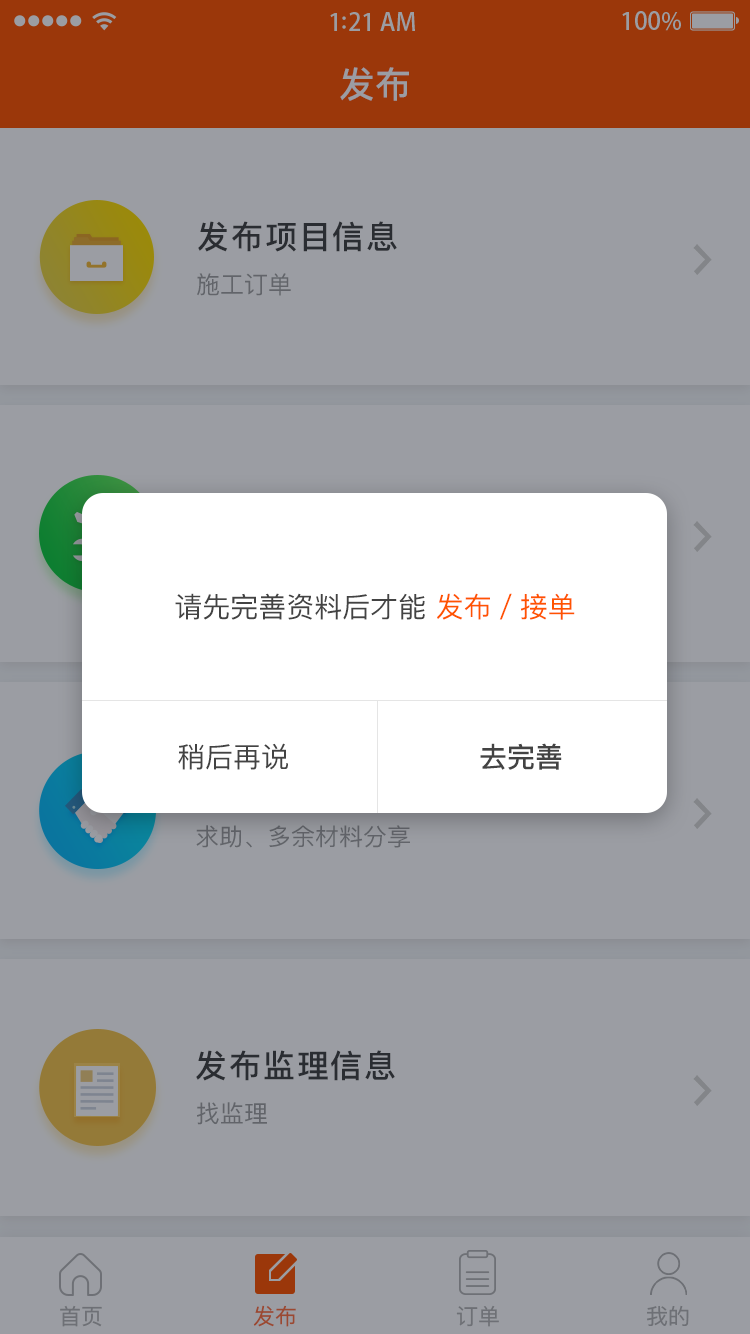
<style>
.page{position:relative;width:750px;height:1334px;background:#9b9da3}
.page>*{position:absolute;margin:0}
.t1{font:36px "PingFangSC-Medium";color:#9b9da3}
.t2{font:32px "PingFangSC-Medium";letter-spacing:0.06em;color:#2a2d32}
.t3{font:24px "PingFangSC-Regular";color:#62646a}
.t4{font:28px "PingFangSC-Regular";color:#434343}
.t5{font:28px "PingFangSC-Regular";color:#ff5400}
.t6{font:28px "PingFangSC-Medium";color:#434343}
.t7{font:24px "PingFangSC-Regular";color:#606268}
.t8{font:22px "PingFangSC-Regular";color:#6e7076}
.t9{font:22px "PingFangSC-Regular";color:#9b4931}
</style>
<div class="page">
<p class="t1" style="left:340px;top:67px;width:69px;height:34px">发布</p>
<p class="t2" style="left:198px;top:221px;width:199px;height:31px">发布项目信息</p>
<p class="t3" style="left:197px;top:273px;width:94px;height:23px">施工订单</p>
<p class="t4" style="left:175px;top:593px;width:400px;height:27px">请先完善资料后才能 <span class="t5">发布／接单</span></p>
<p class="t4" style="left:178px;top:743px;width:110px;height:27px">稍后再说</p>
<p class="t6" style="left:480px;top:743px;width:82px;height:27px">去完善</p>
<p class="t7" style="left:196px;top:825px;width:214px;height:23px">求助、多余材料分享</p>
<p class="t2" style="left:196px;top:1050px;width:199px;height:31px">发布监理信息</p>
<p class="t3" style="left:197px;top:1102px;width:70px;height:23px">找监理</p>
<p class="t8" style="left:60px;top:1305px;width:42px;height:22px">首页</p>
<p class="t9" style="left:253px;top:1305px;width:43px;height:22px">发布</p>
<p class="t8" style="left:456px;top:1305px;width:43px;height:22px">订单</p>
<p class="t8" style="left:647px;top:1305px;width:42px;height:21px">我的</p>
</div>
